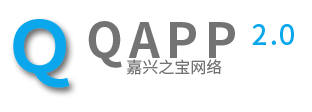
<style>
.page{position:relative;width:312px;height:112px;background:#ffffff}
.page>*{position:absolute;margin:0}
.t1{font:48px "SourceHanSansCN-Bold";letter-spacing:0.13em;color:#737373}
.t2{font:16px "SourceHanSansCN-Normal";color:#737373}
</style>
<div class="page">
<p class="t1" style="left:88px;top:21px;width:147px;height:47px">QAPP</p>
<p class="t2" style="left:127px;top:59px;width:95px;height:16px">嘉兴之宝网络</p>
</div>
